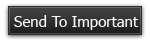
<style>
.page{position:relative;width:150px;height:42px;background:#ffffff}
.page>*{position:absolute;margin:0}
.t1{font:15px "Tahoma";color:#ffffff}
</style>
<div class="page">
<p class="t1" style="left:14px;top:15px;width:125px;height:15px">Send To Important</p>
</div>
